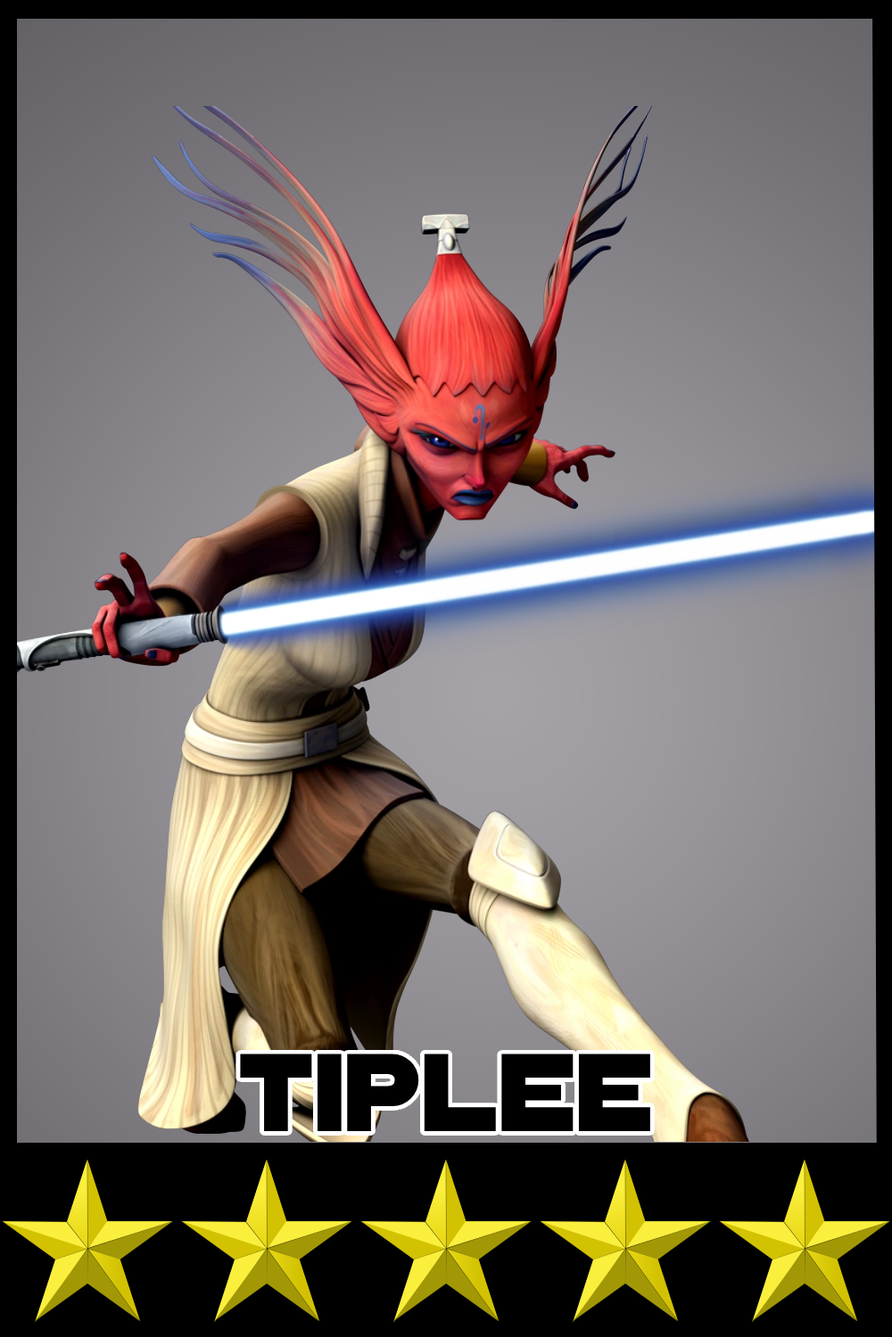
<style>
.page{position:relative;width:892px;height:1337px}
.page>*{position:absolute;margin:0}
.t1{font:118.7px "DistantGalaxy";color:#000000}
</style>
<div class="page">
<p class="t1" style="left:240px;top:1054px;width:410px;height:77px">tiplee</p>
</div>
